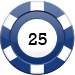
<style>
.page{position:relative;width:75px;height:75px;background:#ffffff}
.page>*{position:absolute;margin:0}
.t1{font:18px "Rockwell";color:#000000}
</style>
<div class="page">
<p class="t1" style="left:28px;top:33px;width:19px;height:12px">25</p>
</div>
